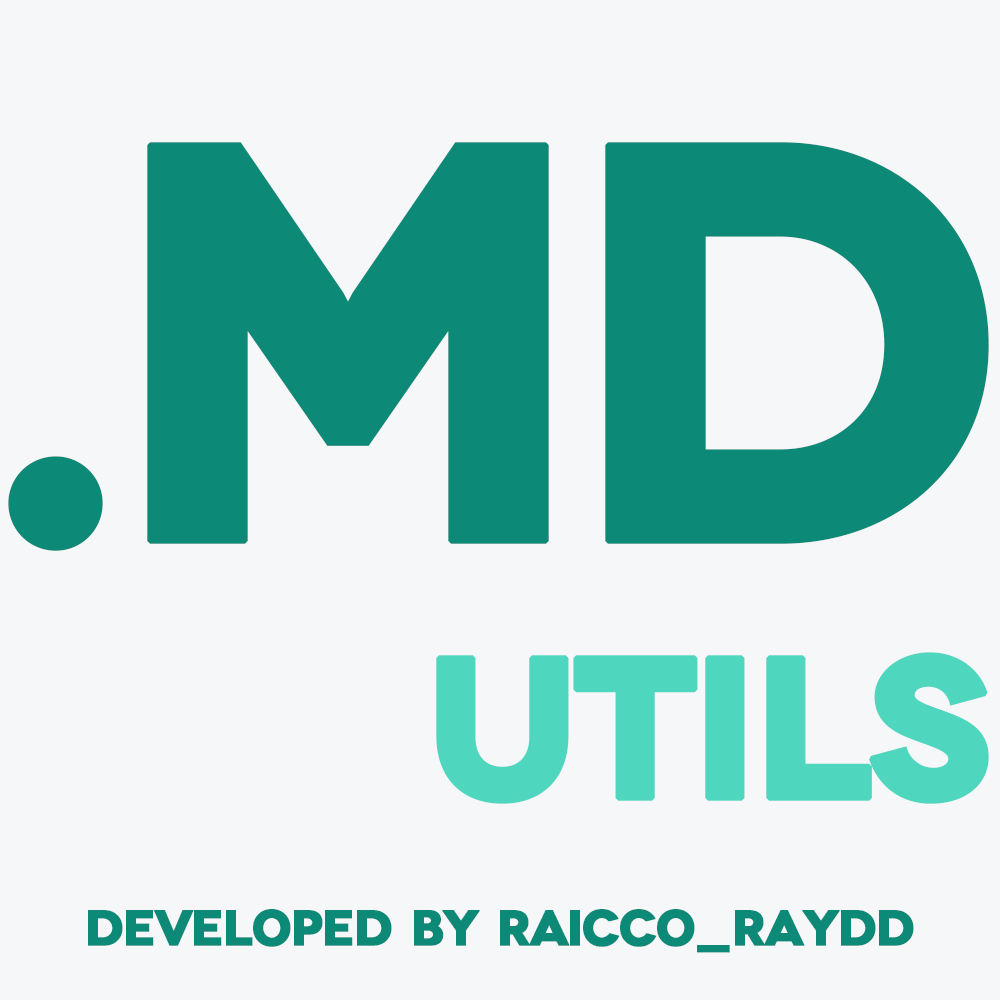
<style>
.page{position:relative;width:1000px;height:1000px;background:#f6f7f9}
.page>*{position:absolute;margin:0}
.t1{font:566.2px "Novecentowide-Bold";letter-spacing:-0.075em;color:#0d8a77;text-transform:uppercase;font-weight:bold}
.t2{font:200.7px "Novecentowide-Bold";letter-spacing:-0.05em;color:#4fd6be;text-transform:uppercase;font-weight:bold}
.t3{font:50px "Novecentowide-Bold";letter-spacing:-0.05em;color:#0d8a77;text-transform:uppercase;font-weight:bold}
</style>
<div class="page">
<p class="t1" style="left:8px;top:142px;width:981px;height:409px">.Md</p>
<p class="t2" style="left:436px;top:652px;width:553px;height:152px">UTILS</p>
<p class="t3" style="left:88px;top:909px;width:826px;height:44px">DEVELOPED BY RAICCO_RAYDD</p>
</div>
